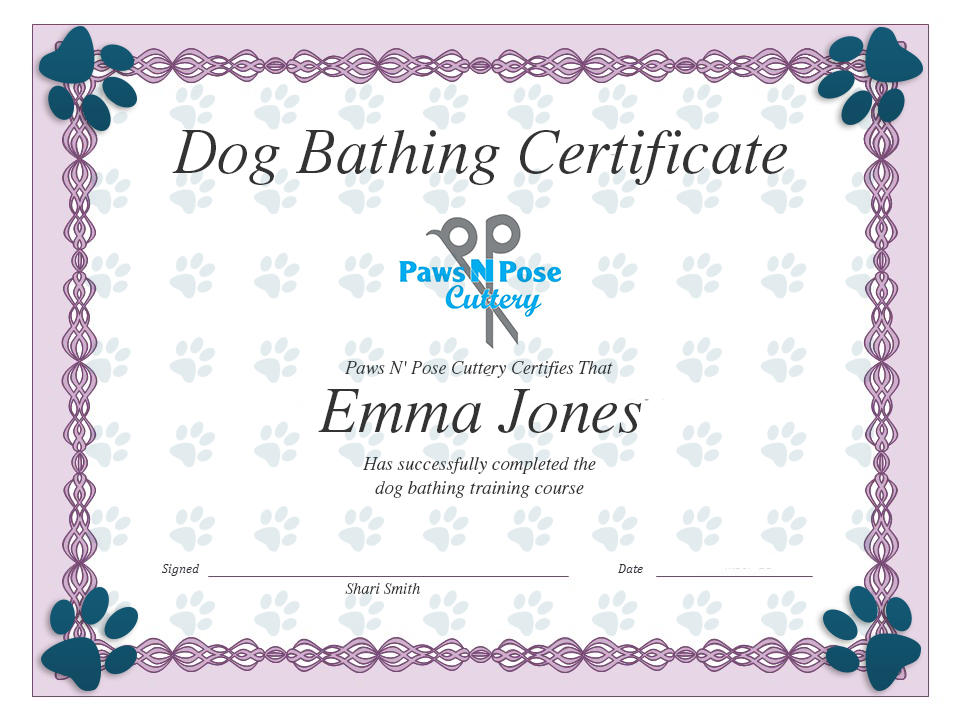
<style>
.page{position:relative;width:960px;height:720px;background:#ffffff}
.page>*{position:absolute;margin:0}
.t1{font:64px "MMTimesItalic";color:#202728}
.t2{font:18.7px "MMTimesItalic";color:#202728}
.t3{font:18.7px/24px "MMTimesItalic";color:#202728}
.t4{font:16px "MMTimesItalic";color:#202728}
</style>
<div class="page">
<p class="t1" style="left:172px;top:130px;width:615px;height:55px">Dog Bathing Certificate</p>
<p class="t2" style="left:345px;top:361px;width:268px;height:17px">Paws N' Pose Cuttery Certifies That</p>
<p class="t1" style="left:318px;top:389px;width:324px;height:44px">Emma Jones</p>
<p class="t3" style="left:363px;top:457px;width:233px;height:41px;text-align:center">Has successfully completed the<br>dog bathing training course</p>
<p class="t4" style="left:345px;top:583px;width:75px;height:11px">Shari Smith</p>
</div>
